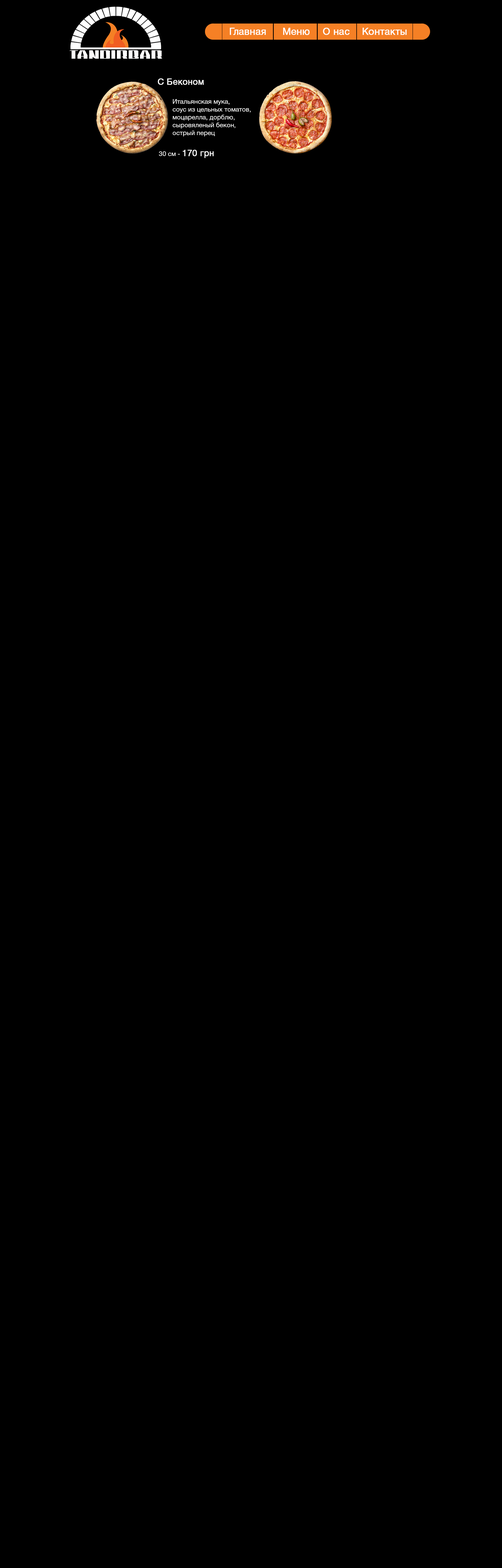
<style>
.page{position:relative;width:502px;height:1568px;background:#000000}
.page>*{position:absolute;margin:0}
.t1{font:9.7px "HelveticaNeueCyr-Roman";color:#ffffff;font-weight:bold}
.t2{font:8.7px "HelveticaNeueCyr-Roman";color:#ffffff;font-weight:bold}
.t3{font:6.5px "HelveticaNeueCyr-Roman";color:#ffffff}
</style>
<div class="page">
<p class="t1" style="left:230px;top:28px;width:36px;height:7px">Главная</p>
<p class="t1" style="left:283px;top:28px;width:26px;height:7px">Меню</p>
<p class="t1" style="left:323px;top:28px;width:26px;height:7px">О нас</p>
<p class="t1" style="left:362px;top:28px;width:44px;height:7px">Контакты</p>
<p class="t2" style="left:158px;top:78px;width:46px;height:7px">С Беконом</p>
<p class="t3" style="left:172px;top:99px;width:79px;height:37px">Итальянская мука, <br>соус из цельных томатов, <br>моцарелла, дорблю, <br>сыровяленый бекон, <br>острый перец</p>
<p class="t3" style="left:159px;top:150px;width:55px;height:8px">30 см - <span class="t2">170 грн</span></p>
</div>
